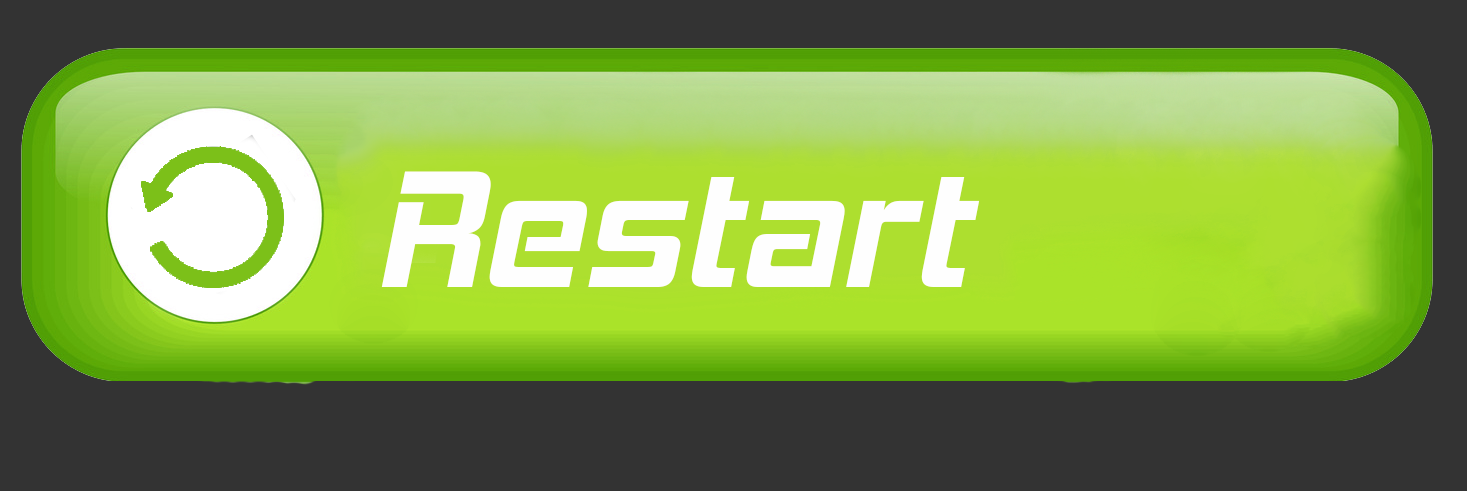
<style>
.page{position:relative;width:1467px;height:491px;background:#333333}
.page>*{position:absolute;margin:0}
.t1{font:170px "HemiHeadRg-BoldItalic";color:#fefefe;scale:0.95 1}
</style>
<div class="page">
<p class="t1" style="left:381px;top:171px;width:599px;height:116px">Restart</p>
</div>
